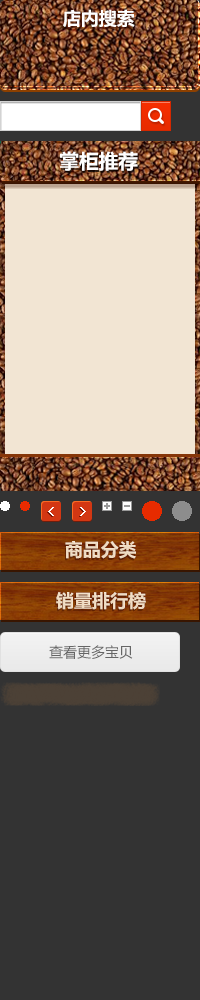
<style>
.page{position:relative;width:200px;height:1000px;background:#333333}
.page>*{position:absolute;margin:0}
.t1{font:18px "MicrosoftYaHei-Bold";color:#ffffff}
.t2{font:20px "MicrosoftYaHei-Bold";color:#ffffff}
.t3{font:18px "MicrosoftYaHei-Bold";color:#f2e5d3}
.t4{font:18px "MicrosoftYaHei-Bold";color:#efdcc3}
.t5{font:14px "MicrosoftYaHei";color:#666666}
</style>
<div class="page">
<p class="t1" style="left:63px;top:9px;width:72px;height:19px">店内搜索</p>
<p class="t2" style="left:60px;top:151px;width:78px;height:20px">掌柜推荐</p>
<p class="t3" style="left:65px;top:541px;width:71px;height:18px">商品分类</p>
<p class="t4" style="left:56px;top:592px;width:90px;height:18px">销量排行榜</p>
<p class="t5" style="left:49px;top:645px;width:84px;height:14px">查看更多宝贝</p>
</div>
